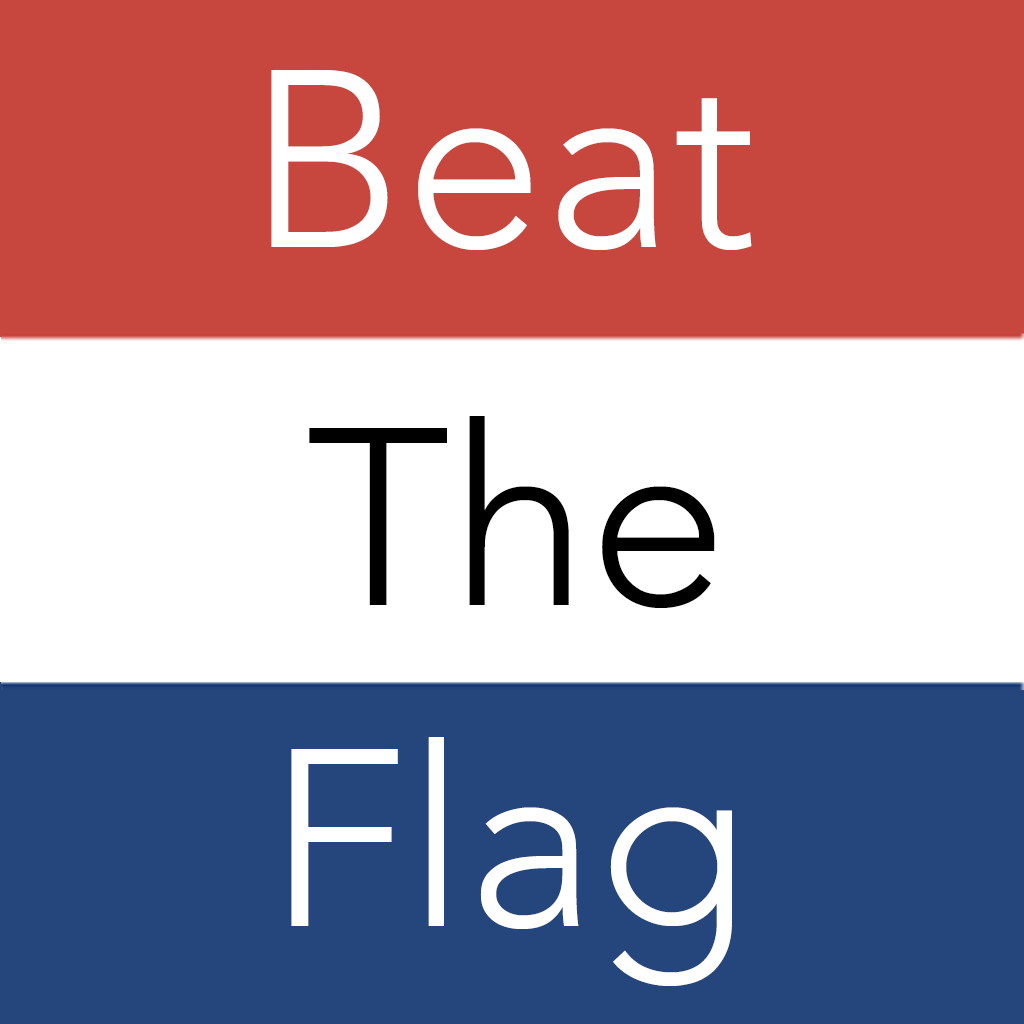
<style>
.page{position:relative;width:1024px;height:1024px;background:#ffffff}
.page>*{position:absolute;margin:0}
.t1{font:250px "Avenir-Light";color:#ffffff}
.t2{font:250px "Avenir-Light";color:#000000}
</style>
<div class="page">
<p class="t1" style="left:271px;top:70px;width:481px;height:180px">Beat</p>
<p class="t2" style="left:309px;top:416px;width:406px;height:192px">The</p>
<p class="t1" style="left:291px;top:737px;width:441px;height:249px">Flag</p>
</div>
